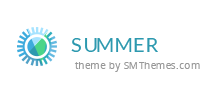
<style>
.page{position:relative;width:201px;height:103px;background:#ffffff}
.page>*{position:absolute;margin:0}
.t1{font:20px "Lato-Regular";color:#2d99af;text-transform:uppercase}
.t2{font:10px "OpenSans";color:#989898;scale:1.04 1}
</style>
<div class="page">
<p class="t1" style="left:71px;top:38px;width:87px;height:14px">Summer</p>
<p class="t2" style="left:74px;top:62px;width:126px;height:10px">theme by SMThemes.com</p>
</div>
